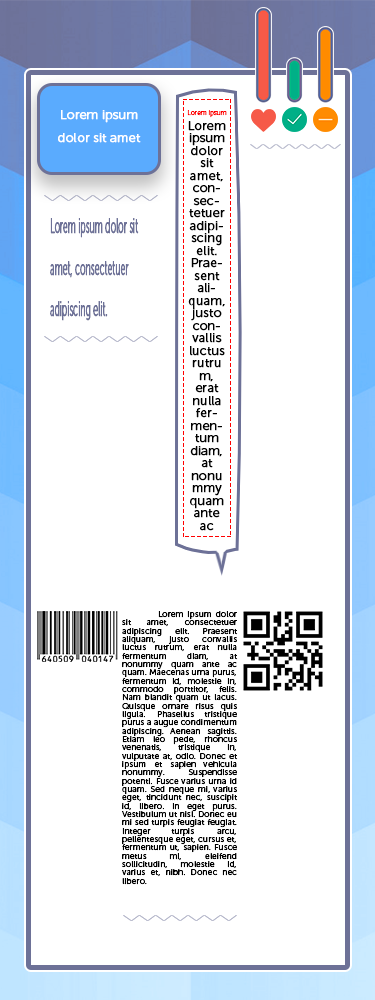
<style>
.page{position:relative;width:375px;height:1000px;background:#ffffff}
.page>*{position:absolute;margin:0}
.t1{font:12.5px/22.9px "MuseoSansCyrl-300";color:#ffffff;font-weight:bold}
.t2{font:6.2px "MuseoSansCyrl-300";color:#ff0000;font-weight:bold}
.t3{font:6.2px "MuseoSansCyrl-300";color:#000000;font-weight:bold}
.t4{font:12.5px/12.5px "MuseoSansCyrl-300";color:#000000;font-weight:bold}
.t5{font:20.8px/41.7px "MuseoSansCyrl-300";color:#6d7197;font-weight:bold;scale:0.41 1}
.t6{font:8.3px/8.3px "MuseoSansCyrl-300";color:#000000;font-weight:bold}
</style>
<div class="page">
<p class="t1" style="left:58px;top:110px;width:83px;height:33px;text-align:center">Lorem ipsum dolor sit amet</p>
<p class="t2" style="left:187px;top:110px;width:40px;height:8px"><span class="t3"> <br><br></span>Lorem ipsum</p>
<p class="t4" style="left:188px;top:121px;width:38px;height:410px;text-align:center">Lorem ipsum dolor sit amet, consectetuer adipiscing elit. Praesent aliquam, justo convallis luctus rutrum, erat nulla fermentum diam, at nonummy quam ante ac quam. Maecenas urna purus, fermentum id, molestie in, commodo porttitor, felis. Nam blandit quam ut lacus. varius eget, tincidunt nec, suscipit id, libero.</p>
<p class="t5" style="left:50px;top:218px;width:89px;height:103px">Lorem ipsum dolor sit amet, consectetuer adipiscing elit.</p>
<p class="t6" style="left:122px;top:611px;width:116px;height:274px;text-align:justify">Lorem ipsum dolor sit amet, consectetuer adipiscing elit. Praesent aliquam, justo convallis luctus rutrum, erat nulla fermentum diam, at nonummy quam ante ac quam. Maecenas urna purus, fermentum id, molestie in, commodo porttitor, felis. Nam blandit quam ut lacus. Quisque ornare risus quis ligula. Phasellus tristique purus a augue condimentum adipiscing. Aenean sagittis. Etiam leo pede, rhoncus venenatis, tristique in, vulputate at, odio. Donec et ipsum et sapien vehicula nonummy. Suspendisse potenti. Fusce varius urna id quam. Sed neque mi, varius eget, tincidunt nec, suscipit id, libero. In eget purus. Vestibulum ut nisl. Donec eu mi sed turpis feugiat feugiat. Integer turpis arcu, pellentesque eget, cursus et, fermentum ut, sapien. Fusce metus mi, eleifend sollicitudin, molestie id, varius et, nibh. Donec nec libero.</p>
</div>
